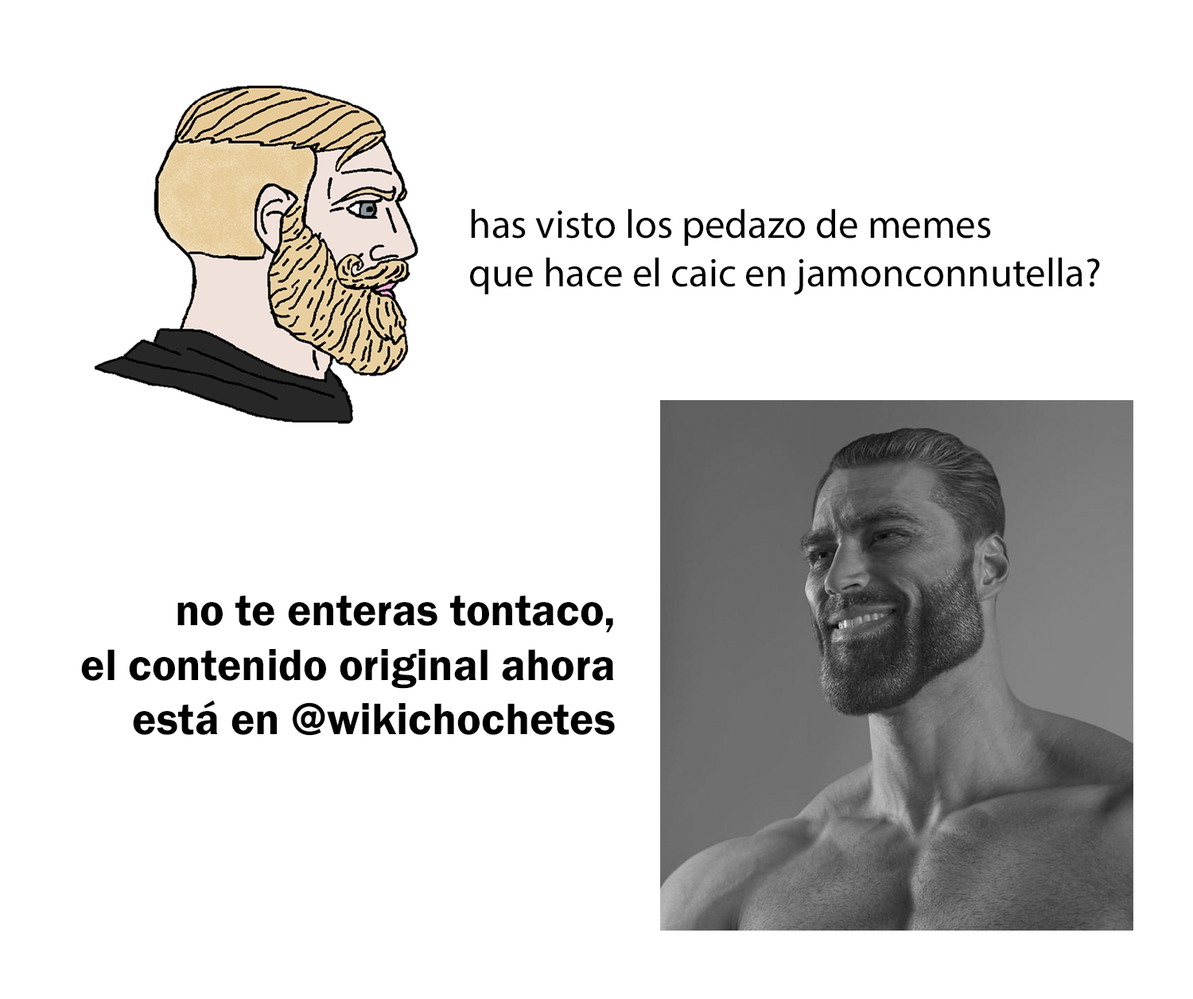
<style>
.page{position:relative;width:1193px;height:999px;background:#ffffff}
.page>*{position:absolute;margin:0}
.t1{font:40.7px "MyriadPro-Regular";color:#000000}
.t2{font:45.6px "FranklinGothic-Demi";color:#000000}
</style>
<div class="page">
<p class="t1" style="left:470px;top:208px;width:630px;height:87px">has visto los pedazo de memes<br>que hace el caic en jamonconnutella?</p>
<p class="t2" style="left:81px;top:595px;width:534px;height:141px;text-align:right">no te enteras tontaco,<br>el contenido original ahora<br>está en @wikichochetes</p>
</div>
